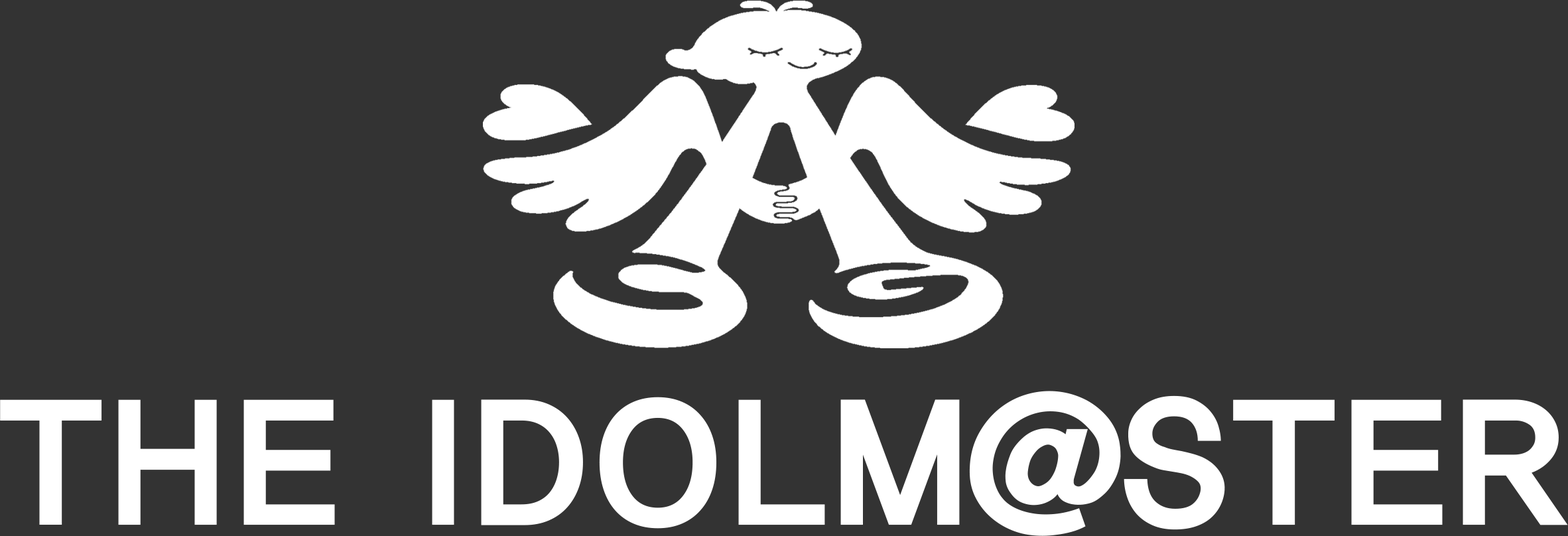
<style>
.page{position:relative;width:1568px;height:536px;background:#333333}
.page>*{position:absolute;margin:0}
.t1{font:175.1px "HaanYGodic25";letter-spacing:-0.13em;color:#ffffff}
</style>
<div class="page">
<p class="t1" style="left:0px;top:391px;width:1568px;height:145px">THE  IDOLM@STER</p>
</div>
